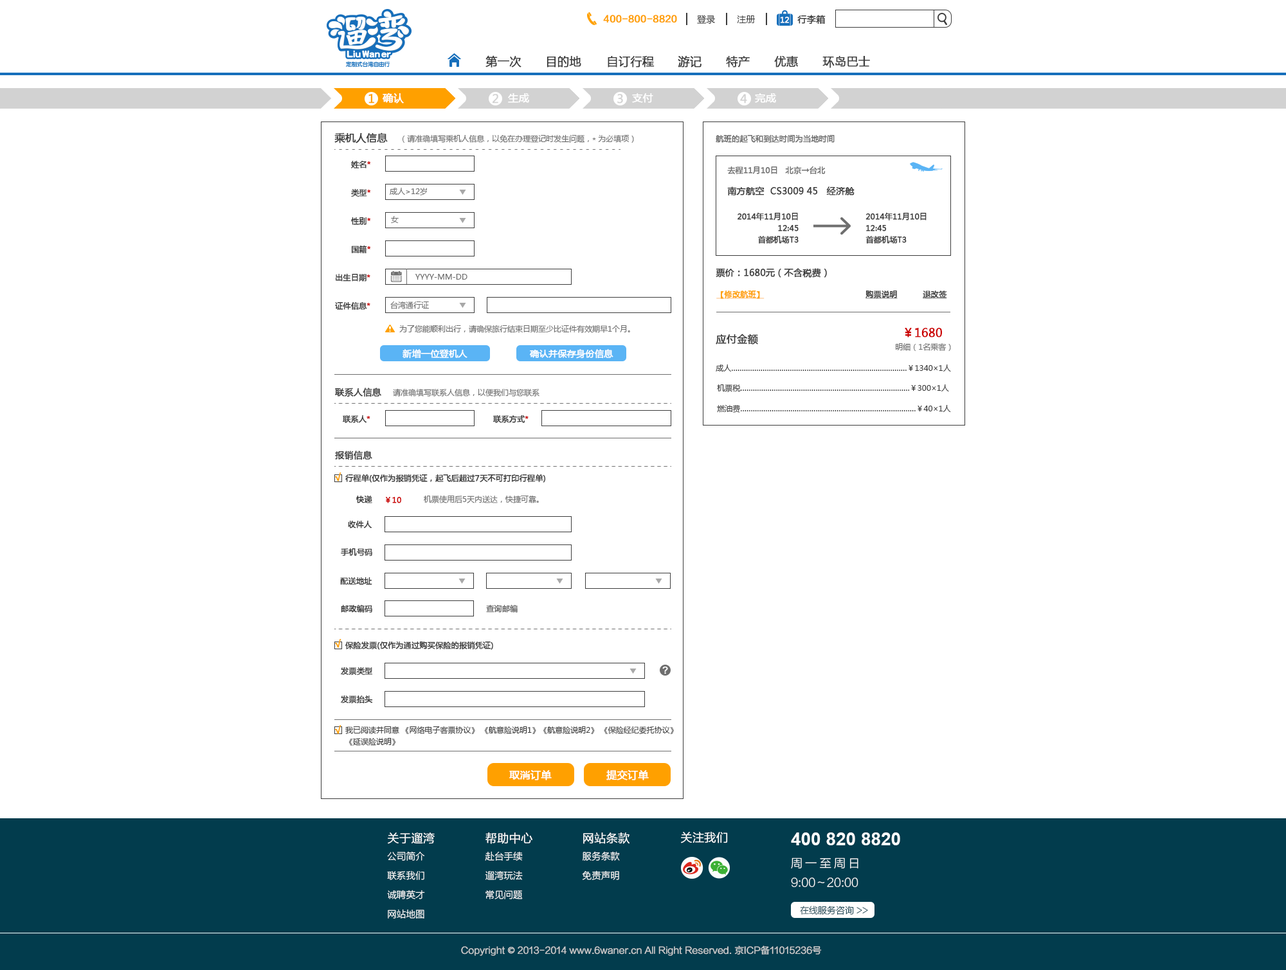
<style>
.page{position:relative;width:1286px;height:970px;background:#ffffff}
.page>*{position:absolute;margin:0}
.t1{font:9px "FZLTZHK--GBK1-0";color:#ffa000;font-weight:bold}
.t2{font:9px "MicrosoftYaHei";color:#3c3c3c}
.t3{font:7.7px "MicrosoftYaHei";color:#fefefe;font-weight:bold}
.t4{font:9px "MicrosoftYaHei";color:#3c3c3c;font-weight:bold}
.t5{font:11.6px "MicrosoftYaHei";color:#3c3c3c;font-weight:bold}
.t6{font:11.6px "MicrosoftYaHei";color:#ffa000;font-weight:bold}
.t7{font:10.3px "MicrosoftYaHei";color:#ffffff;font-weight:bold}
.t8{font:11.6px "MicrosoftYaHei";color:#d2d2d2;font-weight:bold}
.t9{font:10.3px "MicrosoftYaHei";color:#3c3c3c;font-weight:bold}
.t10{font:7.7px "MicrosoftYaHei";color:#6e6e6e}
.t11{font:7.7px "MicrosoftYaHei";color:#6e6e6e;font-weight:bold}
.t12{font:7.7px "MicrosoftYaHei";color:#3c3c3c;font-weight:bold}
.t13{font:7.7px "MicrosoftYaHei";color:#cc0000;font-weight:bold}
.t14{font:7.7px/11.6px "MicrosoftYaHei";color:#3c3c3c;font-weight:bold}
.t15{font:7.7px "MicrosoftYaHei";color:#ffa000;font-weight:bold;text-decoration:underline}
.t16{font:7.7px "MicrosoftYaHei";color:#3c3c3c;font-weight:bold;text-decoration:underline}
.t17{font:11.6px "MicrosoftYaHei";color:#cc0000;font-weight:bold}
.t18{font:9px "MicrosoftYaHei";color:#ffffff;font-weight:bold}
.t19{font:7.7px "MicrosoftYaHei";color:#3c3c3c}
.t20{font:10.3px "MicrosoftYaHei";color:#ffa000;font-weight:bold}
.t21{font:7.7px/11.6px "MicrosoftYaHei";color:#3c3c3c}
.t22{font:9.3px/19.3px "FZLTXHK--GBK1-0";color:#ffffff}
.t23{font:11.6px/19.3px "FZLTXHK--GBK1-0";color:#ffffff;font-weight:bold}
.t24{font:11.6px "FZLTXHK--GBK1-0";color:#ffffff;font-weight:bold}
.t25{font:18px "Arial-BoldMT";color:#ffffff}
.t26{font:11.6px/19.3px "FZLTXHK--GBK1-0";color:#ffffff}
.t27{font:11.6px/19.3px "FZLTXHK--GBK1-0";letter-spacing:0.24em;color:#ffffff}
.t28{font:9px "FZLTXHK--GBK1-0"}
.t29{font:9px "FZLTXHK--GBK1-0";color:#d0d0d0;font-weight:bold}
.t30{font:9px "AdobeHeitiStd-Regular";color:#d0d0d0;font-weight:bold}
</style>
<div class="page">
<p class="t1" style="left:603px;top:15px;width:74px;height:8px">400-800-8820</p>
<p class="t2" style="left:697px;top:15px;width:18px;height:9px">登录</p>
<p class="t2" style="left:737px;top:15px;width:18px;height:8px">注册</p>
<p class="t3" style="left:780px;top:17px;width:9px;height:6px">12</p>
<p class="t4" style="left:797px;top:15px;width:28px;height:9px">行李箱</p>
<p class="t5" style="left:485px;top:55px;width:36px;height:13px">第一次</p>
<p class="t5" style="left:546px;top:56px;width:35px;height:12px">目的地</p>
<p class="t5" style="left:608px;top:56px;width:46px;height:12px">自订行程</p>
<p class="t5" style="left:678px;top:56px;width:23px;height:12px">游记</p>
<p class="t5" style="left:726px;top:56px;width:24px;height:12px">特产</p>
<p class="t5" style="left:774px;top:56px;width:24px;height:12px">优惠</p>
<p class="t5" style="left:822px;top:56px;width:48px;height:12px">环岛巴士</p>
<p class="t6" style="left:368px;top:94px;width:6px;height:10px">1</p>
<p class="t7" style="left:382px;top:93px;width:22px;height:11px">确认</p>
<p class="t8" style="left:492px;top:94px;width:6px;height:10px">2</p>
<p class="t7" style="left:508px;top:93px;width:21px;height:10px">生成</p>
<p class="t8" style="left:617px;top:94px;width:6px;height:10px">3</p>
<p class="t7" style="left:632px;top:93px;width:21px;height:10px">支付</p>
<p class="t8" style="left:740px;top:94px;width:7px;height:10px">4</p>
<p class="t7" style="left:755px;top:93px;width:21px;height:10px">完成</p>
<p class="t9" style="left:334px;top:132px;width:54px;height:11px">乘机人信息</p>
<p class="t10" style="left:402px;top:134px;width:232px;height:9px">（请准确填写乘机人信息，以免在办理登记时发生问题，* 为必填项）</p>
<p class="t11" style="left:716px;top:134px;width:118px;height:9px">航班的起飞和到达时间为当地时间</p>
<p class="t12" style="left:351px;top:161px;width:19px;height:7px">姓名<span class="t13">*</span></p>
<p class="t11" style="left:727px;top:166px;width:98px;height:8px">去程11月10日   北京→台北</p>
<p class="t12" style="left:351px;top:188px;width:19px;height:9px">类型<span class="t13">*</span></p>
<p class="t10" style="left:389px;top:188px;width:38px;height:7px">成人&gt;12岁</p>
<p class="t4" style="left:727px;top:186px;width:127px;height:10px">南方航空  CS3009 45   经济舱</p>
<p class="t12" style="left:351px;top:217px;width:19px;height:8px">性别<span class="t13">*</span></p>
<p class="t10" style="left:391px;top:216px;width:8px;height:7px">女</p>
<p class="t14" style="left:737px;top:212px;width:61px;height:32px;text-align:right">2014年11月10日<br>12:45<br>首都机场T3</p>
<p class="t14" style="left:865px;top:212px;width:61px;height:32px">2014年11月10日<br>12:45<br>首都机场T3</p>
<p class="t12" style="left:351px;top:245px;width:19px;height:9px">国籍<span class="t13">*</span></p>
<p class="t4" style="left:716px;top:268px;width:111px;height:10px">票价：1680元（不含税费）</p>
<p class="t12" style="left:336px;top:273px;width:34px;height:9px">出生日期<span class="t13">*</span></p>
<p class="t10" style="left:415px;top:274px;width:52px;height:6px">YYYY-MM-DD</p>
<p class="t15" style="left:716px;top:291px;width:48px;height:8px">【修改航班】</p>
<p class="t16" style="left:865px;top:291px;width:32px;height:8px">购票说明</p>
<p class="t16" style="left:923px;top:291px;width:24px;height:8px">退改签</p>
<p class="t12" style="left:335px;top:302px;width:35px;height:8px">证件信息<span class="t13">*</span></p>
<p class="t10" style="left:390px;top:301px;width:39px;height:8px">台湾通行证</p>
<p class="t10" style="left:399px;top:325px;width:231px;height:8px">为了您能顺利出行，请确保旅行结束日期至少比证件有效期早1个月。</p>
<p class="t17" style="left:905px;top:328px;width:37px;height:10px">￥1680</p>
<p class="t9" style="left:716px;top:334px;width:42px;height:11px">应付金额</p>
<p class="t18" style="left:402px;top:349px;width:65px;height:10px">新增一位登机人</p>
<p class="t18" style="left:529px;top:349px;width:84px;height:10px">确认并保存身份信息</p>
<p class="t10" style="left:896px;top:343px;width:55px;height:8px">明细（1名乘客）</p>
<p class="t19" style="left:716px;top:365px;width:235px;height:7px">成人…………………………………………………………………………￥1340×1人</p>
<p class="t4" style="left:335px;top:388px;width:46px;height:9px">联系人信息</p>
<p class="t10" style="left:393px;top:388px;width:146px;height:9px">请准确填写联系人信息，以便我们与您联系</p>
<p class="t19" style="left:717px;top:384px;width:232px;height:8px">机票税………………………………………………………………………￥300×1人</p>
<p class="t19" style="left:717px;top:404px;width:234px;height:9px">燃油费…………………………………………………………………………￥40×1人</p>
<p class="t12" style="left:343px;top:415px;width:27px;height:8px">联系人<span class="t13">*</span></p>
<p class="t12" style="left:493px;top:415px;width:35px;height:8px">联系方式<span class="t13">*</span></p>
<p class="t4" style="left:335px;top:451px;width:37px;height:9px">报销信息</p>
<p class="t20" style="left:334px;top:473px;width:7px;height:9px">√</p>
<p class="t12" style="left:345px;top:474px;width:201px;height:9px">行程单(仅作为报销凭证，起飞后超过7天不可打印行程单)</p>
<p class="t12" style="left:356px;top:495px;width:16px;height:8px">快递</p>
<p class="t13" style="left:386px;top:497px;width:15px;height:6px">￥10</p>
<p class="t10" style="left:424px;top:495px;width:115px;height:8px">机票使用后5天内送达，快捷可靠。</p>
<p class="t12" style="left:348px;top:521px;width:24px;height:7px">收件人</p>
<p class="t12" style="left:341px;top:548px;width:31px;height:8px">手机号码</p>
<p class="t12" style="left:340px;top:577px;width:32px;height:8px">配送地址</p>
<p class="t12" style="left:341px;top:605px;width:31px;height:8px">邮政编码</p>
<p class="t11" style="left:486px;top:604px;width:32px;height:9px">查询邮编</p>
<p class="t20" style="left:334px;top:639px;width:7px;height:9px">√</p>
<p class="t12" style="left:345px;top:641px;width:148px;height:9px">保险发票(仅作为通过购买保险的报销凭证)</p>
<p class="t12" style="left:341px;top:667px;width:31px;height:8px">发票类型</p>
<p class="t12" style="left:341px;top:695px;width:32px;height:9px">发票抬头</p>
<p class="t20" style="left:334px;top:725px;width:7px;height:9px">√</p>
<p class="t21" style="left:345px;top:726px;width:329px;height:20px">我已阅读并同意 《网络电子客票协议》 《航意险说明1》《航意险说明2》 《保险经纪委托协议》<br>《延误险说明》</p>
<p class="t7" style="left:509px;top:770px;width:43px;height:10px">取消订单</p>
<p class="t7" style="left:606px;top:770px;width:43px;height:10px">提交订单</p>
<p class="t22" style="left:387px;top:833px;width:48px;height:86px"><span class="t23">关于遛湾<br></span>公司简介<br>联系我们<br>诚聘英才<br>网站地图</p>
<p class="t22" style="left:485px;top:832px;width:47px;height:67px"><span class="t23">帮助中心<br></span>赴台手续 <br>遛湾玩法 <br>常见问题</p>
<p class="t22" style="left:582px;top:833px;width:47px;height:47px"><span class="t23">网站条款 <br></span>服务条款<br>免责声明</p>
<p class="t24" style="left:681px;top:832px;width:47px;height:11px">关注我们</p>
<p class="t25" style="left:791px;top:833px;width:109px;height:12px">400 820 8820</p>
<p class="t26" style="left:791px;top:858px;width:67px;height:29px"><span class="t27">周一至周日<br></span>9:00～20:00</p>
<p class="t28" style="left:800px;top:906px;width:68px;height:9px">在线服务咨询 &gt;&gt;</p>
<p class="t29" style="left:461px;top:946px;width:361px;height:10px">Copyright <span class="t30">©</span> 2013-2014 www.6waner.cn All Right Reserved. 京ICP备11015236号</p>
</div>
